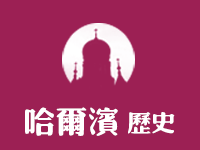
<style>
.page{position:relative;width:200px;height:150px;background:#9c2054}
.page>*{position:absolute;margin:0}
.t1{font:31.2px "¾­µä·±·ÂÔ² Regular";color:#ffffff}
.t2{font:23.7px "¾­µä·±·ÂÔ² Regular";color:#ffffff}
</style>
<div class="page">
<p class="t1" style="left:25px;top:107px;width:93px;height:29px">哈尔滨</p>
<p class="t2" style="left:128px;top:112px;width:47px;height:22px">历史</p>
</div>
